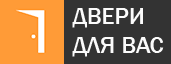
<style>
.page{position:relative;width:171px;height:64px;background:#333333}
.page>*{position:absolute;margin:0}
.t1{font:24px "FranklinGothic-Medium";color:#fbfbfb}
</style>
<div class="page">
<p class="t1" style="left:72px;top:8px;width:92px;height:49px">ДВЕРИ<br>ДЛЯ ВАС</p>
</div>
